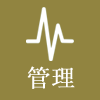
<style>
.page{position:relative;width:100px;height:100px;background:#918440}
.page>*{position:absolute;margin:0}
.t1{font:24px "NSimSun";color:#ffffff;font-weight:bold}
</style>
<div class="page">
<p class="t1" style="left:27px;top:66px;width:48px;height:23px">管理</p>
</div>
